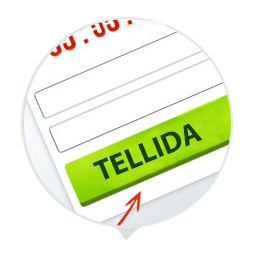
<style>
.page{position:relative;width:256px;height:258px;background:#ffffff}
.page>*{position:absolute;margin:0}
.t1{font:30px "MyriadPro-Bold";color:#153e13}
</style>
<div class="page">
<p class="t1" style="left:92px;top:123px;width:111px;height:57px;rotate:-23deg">TELLIDA</p>
</div>
